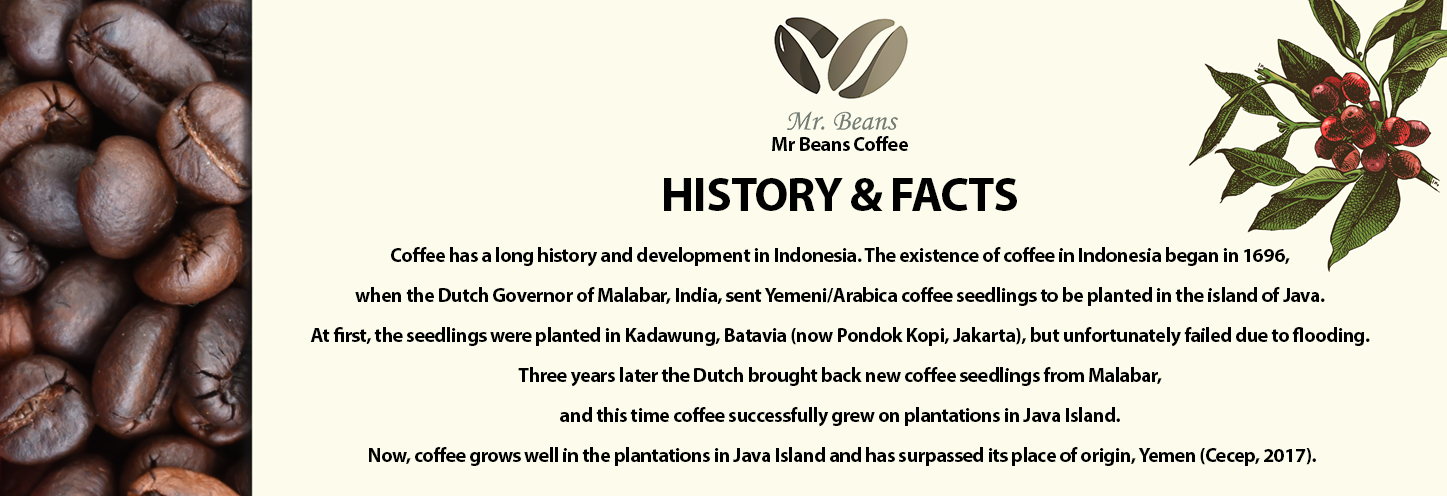
<style>
.page{position:relative;width:1447px;height:496px;background:#fdfcec}
.page>*{position:absolute;margin:0}
.t1{font:20px/30px "MyriadPro-Bold";letter-spacing:-0.025em;color:#000000}
.t2{font:48px/30px "MyriadPro-Bold";letter-spacing:-0.025em;color:#000000}
.t3{font:20px/40px "MyriadPro-Bold";letter-spacing:-0.025em;color:#000000}
</style>
<div class="page">
<p class="t1" style="left:664px;top:136px;width:353px;height:75px;text-align:center">Mr Beans Coffee<br><br><span class="t2">HISTORY &amp; FACTS</span></p>
<p class="t3" style="left:310px;top:247px;width:1060px;height:219px;text-align:center">Coffee has a long history and development in Indonesia. The existence of coffee in Indonesia began in 1696, <br>when the Dutch Governor of Malabar, India, sent Yemeni/Arabica coffee seedlings to be planted in the island of Java. <br>At first, the seedlings were planted in Kadawung, Batavia (now Pondok Kopi, Jakarta), but unfortunately failed due to flooding. <br>Three years later the Dutch brought back new coffee seedlings from Malabar, <br>and this time coffee successfully grew on plantations in Java Island. <br>Now, coffee grows well in the plantations in Java Island and has surpassed its place of origin, Yemen (Cecep, 2017).</p>
</div>
